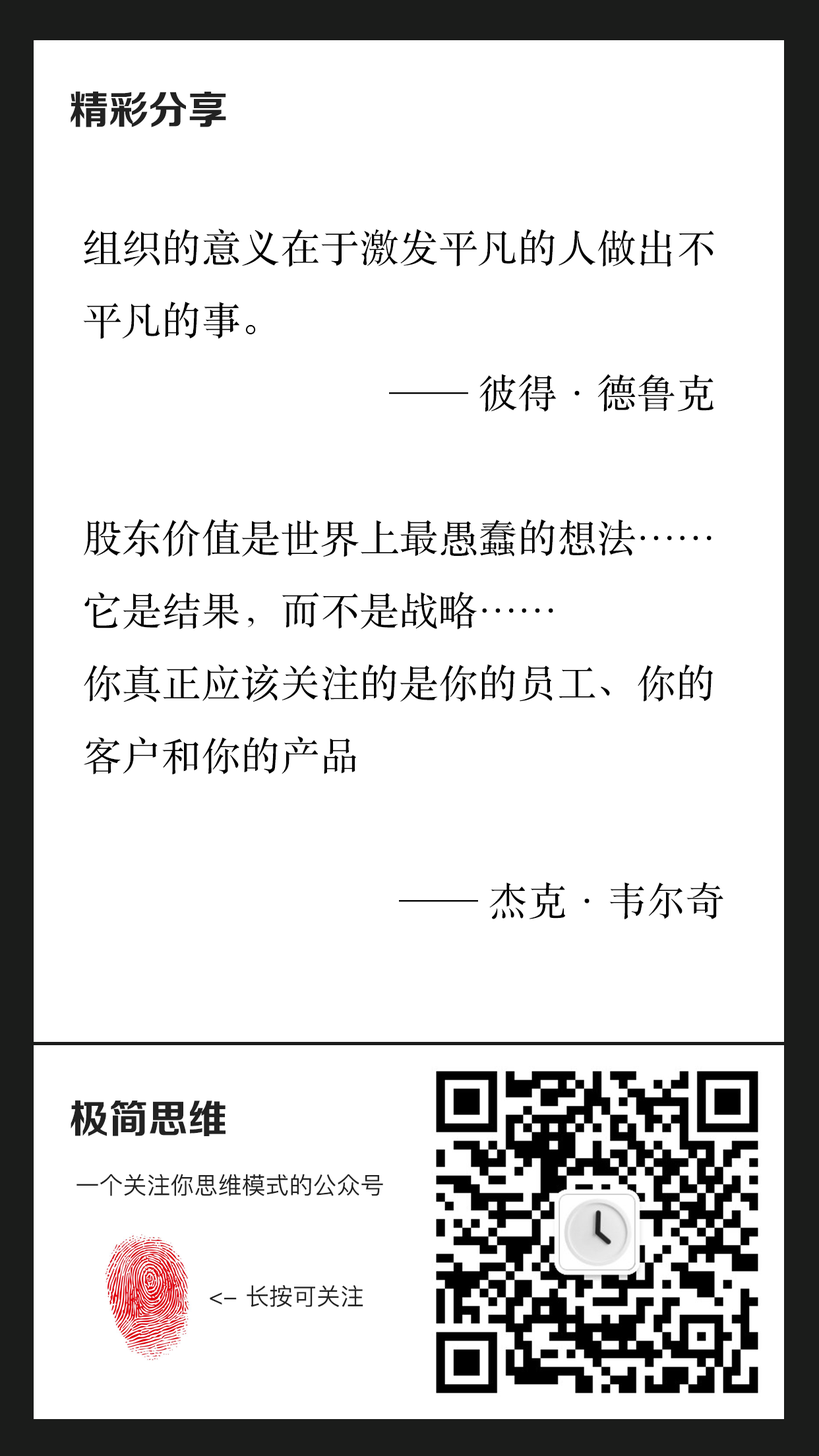
<style>
.page{position:relative;width:819px;height:1456px;background:#ffffff}
.page>*{position:absolute;margin:0}
.t1{font:39.6px "FZZCHJW--GB1-0";color:#222222}
.t2{font:39.6px/72.5px "STSongti-SC-Regular";color:#000000}
.t3{font:23.7px "PingFangSC-Regular";color:#222222}
</style>
<div class="page">
<p class="t1" style="left:71px;top:91px;width:155px;height:36px">精彩分享</p>
<p class="t2" style="left:83px;top:229px;width:640px;height:690px">组织的意义在于激发平凡的人做出不<br>平凡的事。<br>                               —— 彼得·德鲁克<br><br>股东价值是世界上最愚蠢的想法……<br>它是结果，而不是战略……<br>你真正应该关注的是你的员工、你的<br>客户和你的产品<br><br>                                —— 杰克·韦尔奇</p>
<p class="t1" style="left:71px;top:1100px;width:155px;height:36px">极简思维</p>
<p class="t3" style="left:76px;top:1174px;width:307px;height:22px">一个关注你思维模式的公众号</p>
<p class="t3" style="left:210px;top:1285px;width:153px;height:23px">&lt;- 长按可关注</p>
</div>
